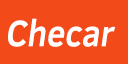
<style>
.page{position:relative;width:128px;height:64px;background:#f24a18}
.page>*{position:absolute;margin:0}
.t1{font:37.8px "FogSansIt";color:#ffffff;scale:0.87 1}
</style>
<div class="page">
<p class="t1" style="left:8px;top:18px;width:108px;height:29px">Checar</p>
</div>
